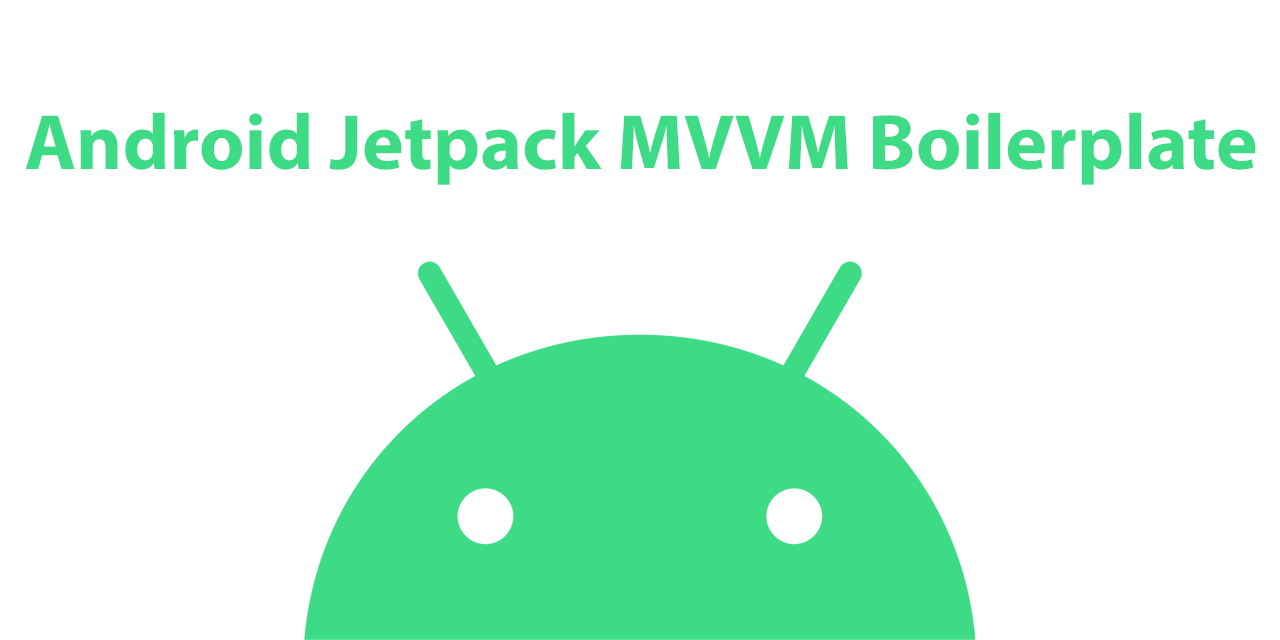
<style>
.page{position:relative;width:1280px;height:640px;background:#ffffff}
.page>*{position:absolute;margin:0}
.t1{font:79.2px "MyriadPro-Bold";color:#3ddb85}
</style>
<div class="page">
<p class="t1" style="left:25px;top:112px;width:1231px;height:73px">Android Jetpack MVVM Boilerplate</p>
</div>
